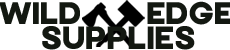
<style>
.page{position:relative;width:230px;height:50px;background:#ffffff}
.page>*{position:absolute;margin:0}
.t1{font:28px "Quart-Regular";color:#131811}
.t2{font:29px "Quart-Regular";color:#131811}
</style>
<div class="page">
<p class="t1" style="left:0px;top:1px;width:232px;height:24px">WILD                 EDGE</p>
<p class="t2" style="left:42px;top:26px;width:153px;height:24px">SUPPLIES</p>
</div>
